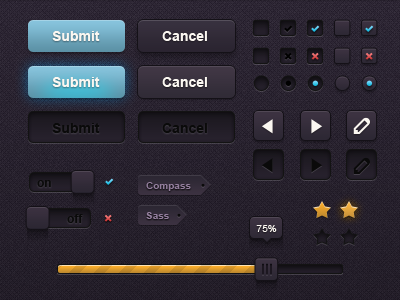
<style>
.page{position:relative;width:400px;height:300px}
.page>*{position:absolute;margin:0}
.t1{font:14px "Arial-BoldMT";color:#fbf7f1}
.t2{font:14px "Arial-BoldMT";color:#0a0a0a}
.t3{font:12px "Arial-BoldMT";color:#0a0a0a}
.t4{font:10px "Arial-BoldMT";color:#937e9d}
.t5{font:10px "ArialMT";color:#fbf7f1}
</style>
<div class="page">
<p class="t1" style="left:52px;top:31px;width:48px;height:10px">Submit</p>
<p class="t1" style="left:162px;top:31px;width:45px;height:10px">Cancel</p>
<p class="t1" style="left:52px;top:77px;width:48px;height:10px">Submit</p>
<p class="t1" style="left:162px;top:77px;width:45px;height:10px">Cancel</p>
<p class="t2" style="left:52px;top:123px;width:48px;height:10px">Submit</p>
<p class="t2" style="left:162px;top:123px;width:45px;height:10px">Cancel</p>
<p class="t3" style="left:37px;top:180px;width:14px;height:7px">on</p>
<p class="t4" style="left:146px;top:182px;width:45px;height:9px">Compass</p>
<p class="t3" style="left:67px;top:214px;width:16px;height:9px">off</p>
<p class="t4" style="left:146px;top:212px;width:23px;height:7px">Sass</p>
<p class="t5" style="left:256px;top:225px;width:21px;height:7px">75%</p>
</div>
